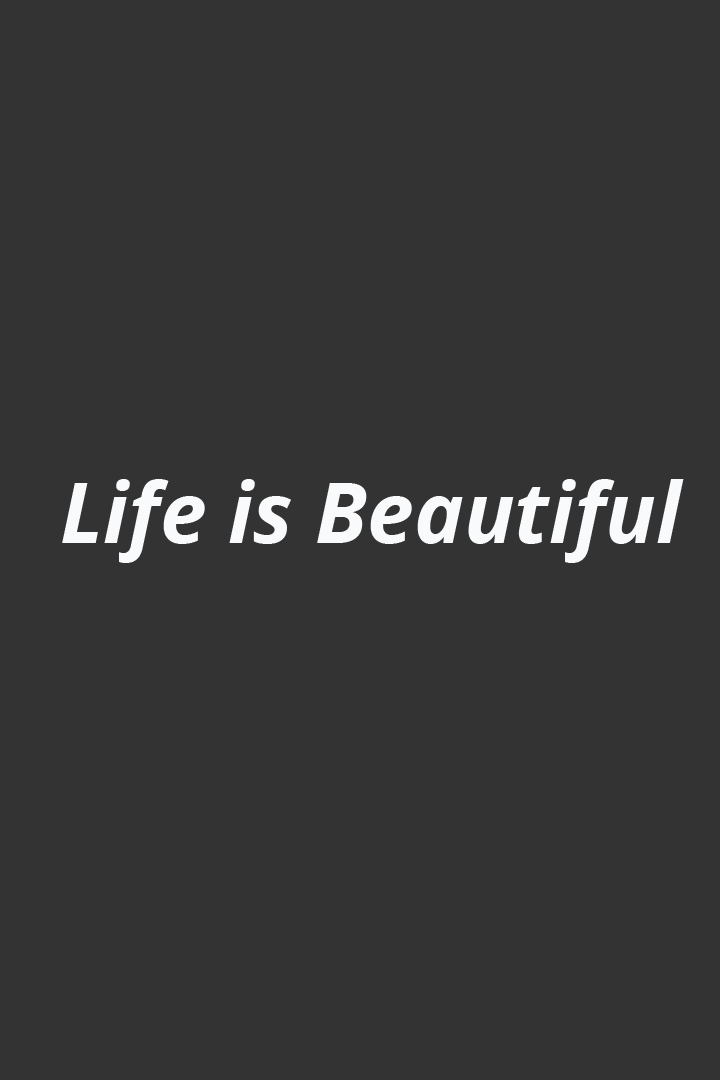
<style>
.page{position:relative;width:720px;height:1080px;background:#333333}
.page>*{position:absolute;margin:0}
.t1{font:84px "OpenSans-BoldItalic";color:#f9fafb}
</style>
<div class="page">
<p class="t1" style="left:62px;top:479px;width:622px;height:84px">Life is Beautiful</p>
</div>
